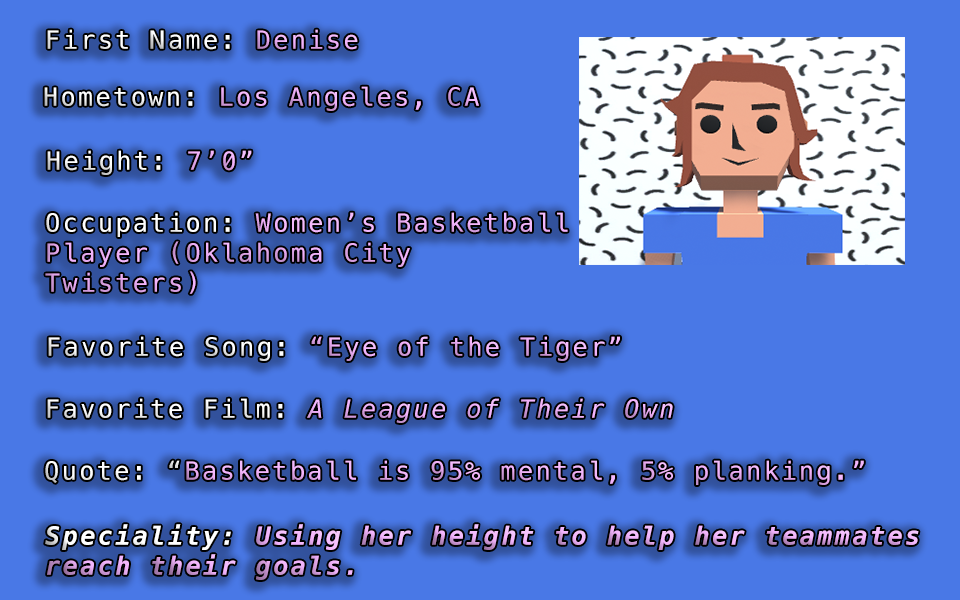
<style>
.page{position:relative;width:960px;height:600px;background:#4978e6}
.page>*{position:absolute;margin:0}
.t1{font:25px "Menlo-Regular";letter-spacing:0.1em;color:#ffffff}
.t2{font:25px "Menlo-Regular";letter-spacing:0.1em;color:#f2b3fc}
.t3{font:25px "Menlo-Italic";letter-spacing:0.1em;color:#f2b3fc}
.t4{font:25px "Menlo-BoldItalic";letter-spacing:0.1em;color:#f2b3fc}
.t5{font:25px "Menlo-BoldItalic";letter-spacing:0.1em;color:#ffffff}
</style>
<div class="page">
<p class="t1" style="left:47px;top:29px;width:311px;height:21px">First Name: <span class="t2">Denise</span></p>
<p class="t2" style="left:44px;top:86px;width:435px;height:25px"><span class="t1">Hometown: </span>Los Angeles, CA</p>
<p class="t1" style="left:47px;top:150px;width:205px;height:25px">Height: <span class="t2">7’0”</span></p>
<p class="t2" style="left:45px;top:212px;width:523px;height:82px"><span class="t1">Occupation: </span>Women’s Basketball <br>Player (Oklahoma City <br>Twisters)</p>
<p class="t2" style="left:48px;top:336px;width:572px;height:25px"><span class="t1">Favorite Song: </span>“Eye of the Tiger”</p>
<p class="t3" style="left:47px;top:398px;width:626px;height:25px"><span class="t1">Favorite Film: </span>A League of Their Own</p>
<p class="t2" style="left:45px;top:460px;width:819px;height:25px"><span class="t1">Quote: “</span>Basketball is 95% mental, 5% planking.”</p>
<p class="t4" style="left:45px;top:524px;width:874px;height:56px"><span class="t5">Speciality: </span>Using her height to help her teammates<br>reach their goals.</p>
</div>
